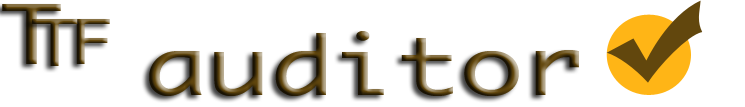
<style>
.page{position:relative;width:745px;height:107px;background:#ffffff}
.page>*{position:absolute;margin:0}
.t1{font:79.2px "Ayuthaya";scale:1.33 1}
.t2{font:61.6px "Ayuthaya";scale:1.33 1}
.t3{font:59.6px "Ayuthaya";scale:1.33 1}
</style>
<div class="page">
<p class="t1" style="left:2px;top:4px;width:59px;height:60px">T</p>
<p class="t2" style="left:31px;top:19px;width:47px;height:47px">T</p>
<p class="t3" style="left:76px;top:19px;width:34px;height:45px">F</p>
<p class="t1" style="left:149px;top:31px;width:430px;height:65px">auditor</p>
</div>
